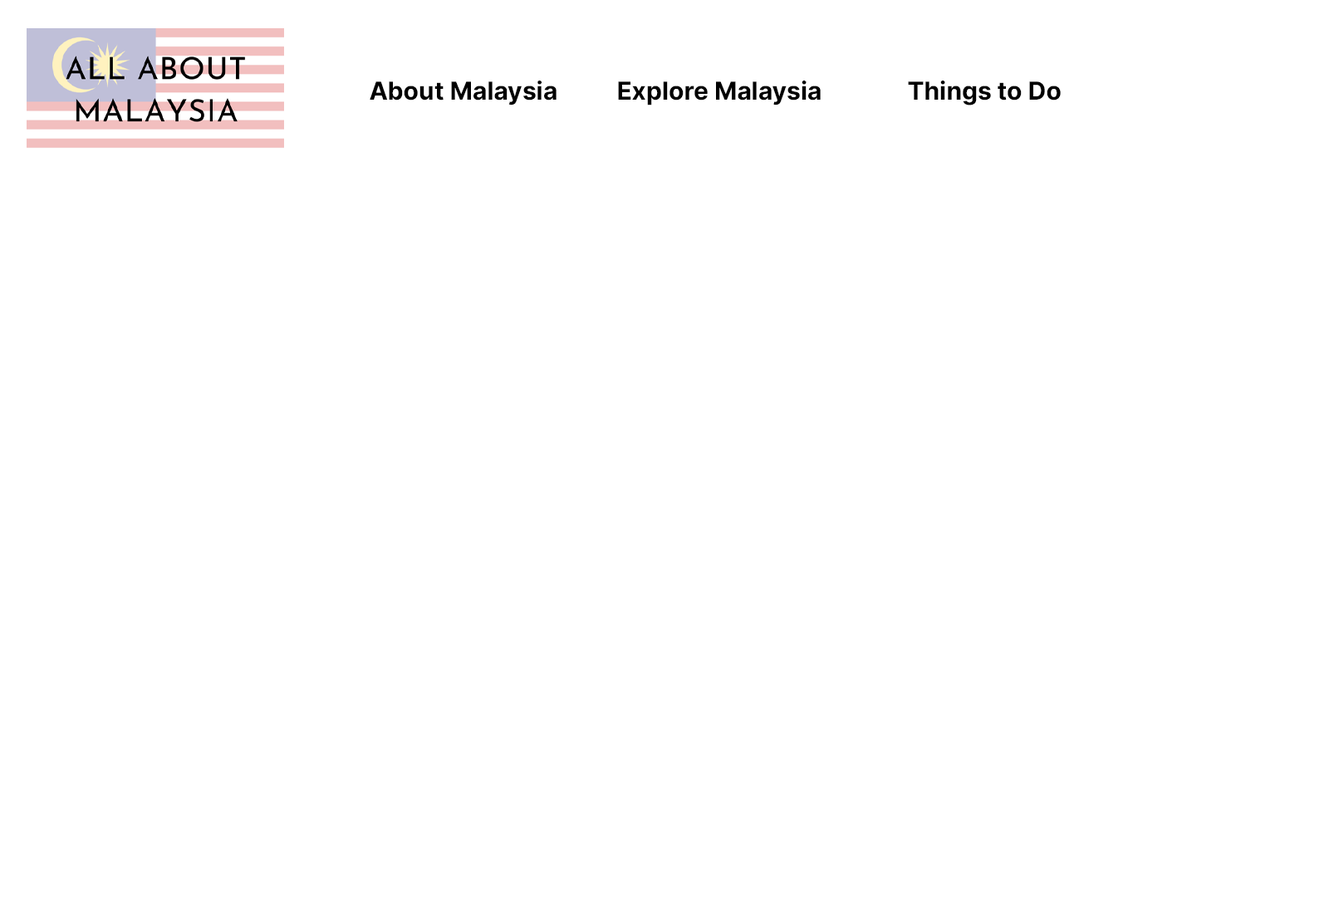
<style>
.page{position:relative;width:1329px;height:897px;background:#ffffff}
.page>*{position:absolute;margin:0}
.t1{font:24.9px "Inter-Bold";color:#000000}
</style>
<div class="page">
<p class="t1" style="left:370px;top:81px;width:187px;height:24px">About Malaysia</p>
<p class="t1" style="left:618px;top:81px;width:203px;height:24px">Explore Malaysia</p>
<p class="t1" style="left:908px;top:81px;width:153px;height:24px">Things to Do</p>
</div>
